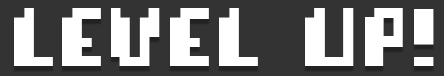
<style>
.page{position:relative;width:444px;height:76px;background:#333333}
.page>*{position:absolute;margin:0}
.t1{font:97px "Pixellifesmallcap";letter-spacing:0.06em;color:#ffffff}
</style>
<div class="page">
<p class="t1" style="left:14px;top:8px;width:420px;height:58px">LEVEL UP!</p>
</div>
